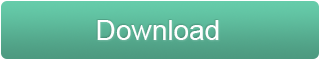
<style>
.page{position:relative;width:320px;height:60px}
.page>*{position:absolute;margin:0}
.t1{font:28px "ArialMT";color:#ffffff}
</style>
<div class="page">
<p class="t1" style="left:97px;top:20px;width:122px;height:20px">Download</p>
</div>
